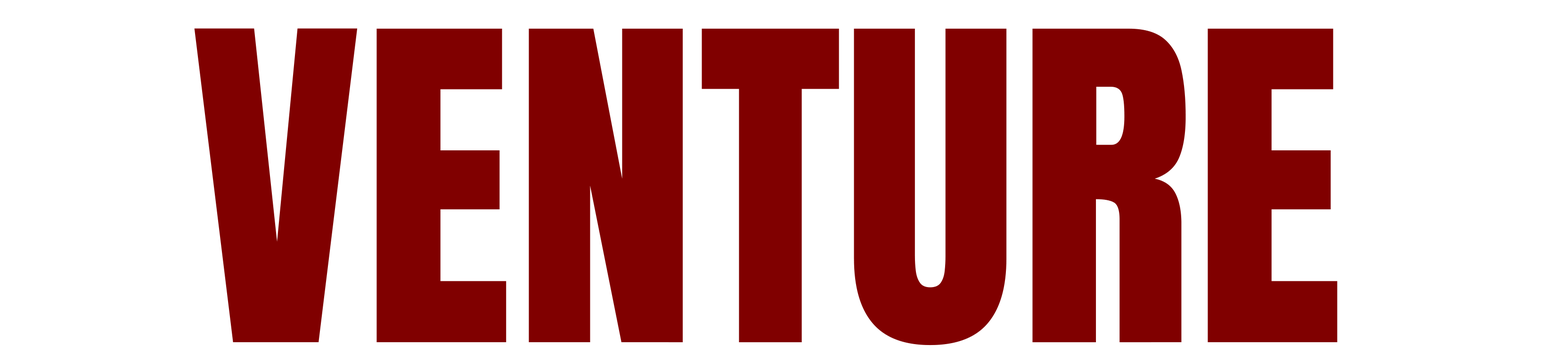
<style>
.page{position:relative;width:1568px;height:362px;background:#ffffff}
.page>*{position:absolute;margin:0}
.t1{font:364.5px "Anton-Regular";color:#800000;text-transform:uppercase}
</style>
<div class="page">
<p class="t1" style="left:194px;top:28px;width:1144px;height:317px">VENTURE</p>
</div>
